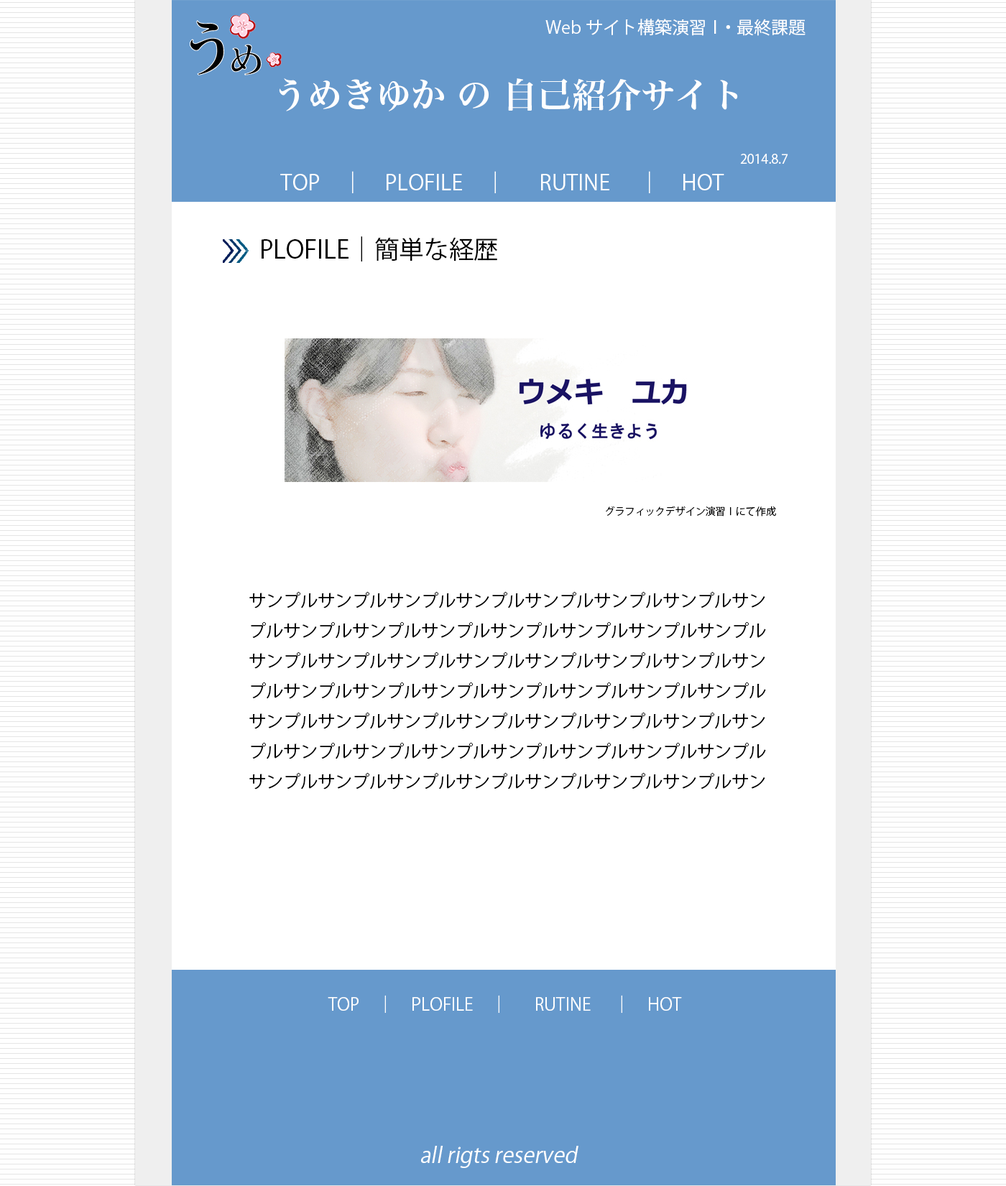
<style>
.page{position:relative;width:1006px;height:1186px;background:#ffffff}
.page>*{position:absolute;margin:0}
.t1{font:17.2px "KozGoPr6N-Regular";color:#ffffff}
.t2{font:34.5px "HiraMinProN-W6";color:#ffffff}
.t3{font:12.9px "KozGoPr6N-Regular";color:#ffffff}
.t4{font:21.5px "KozGoPr6N-Regular";color:#ffffff}
.t5{font:24.9px "KozGoPr6N-Regular";color:#000000}
.t6{font:10.1px "KozGoPr6N-Regular";color:#000000}
.t7{font:17.2px "KozGoPr6N-Regular";color:#000000}
.t8{font:21.5px "KozGoPr6N-Regular";color:#ffffff;font-style:italic}
</style>
<div class="page">
<p class="t1" style="left:545px;top:19px;width:260px;height:17px">Webサイト構築演習Ⅰ・最終課題</p>
<p class="t2" style="left:279px;top:78px;width:459px;height:33px">うめきゆか の 自己紹介サイト</p>
<p class="t3" style="left:740px;top:154px;width:48px;height:10px">2014.8.7</p>
<p class="t4" style="left:280px;top:171px;width:444px;height:22px">TOP　│　PLOFILE　│　 RUTINE 　│　HOT</p>
<p class="t5" style="left:261px;top:236px;width:236px;height:25px">PLOFILE│簡単な経歴</p>
<p class="t6" style="left:605px;top:506px;width:171px;height:10px">グラフィックデザイン演習Ⅰにて作成</p>
<p class="t7" style="left:249px;top:592px;width:517px;height:197px">サンプルサンプルサンプルサンプルサンプルサンプルサンプルサンプルサンプルサンプルサンプルサンプルサンプルサンプルサンプルサンプルサンプルサンプルサンプルサンプルサンプルサンプルサンプルサンプルサンプルサンプルサンプルサンプルサンプルサンプルサンプルサンプルサンプルサンプルサンプルサンプルサンプルサンプルサンプルサンプルサンプルサンプルサンプルサンプルサンプルサンプルサンプルサンプルサンプルサンプルサンプルサンプルサンプルサンプルサンプルサンプル</p>
<p class="t1" style="left:328px;top:995px;width:354px;height:18px">TOP　│　PLOFILE　│　 RUTINE 　│　HOT</p>
<p class="t8" style="left:421px;top:1146px;width:157px;height:22px">all rigts reserved</p>
</div>
